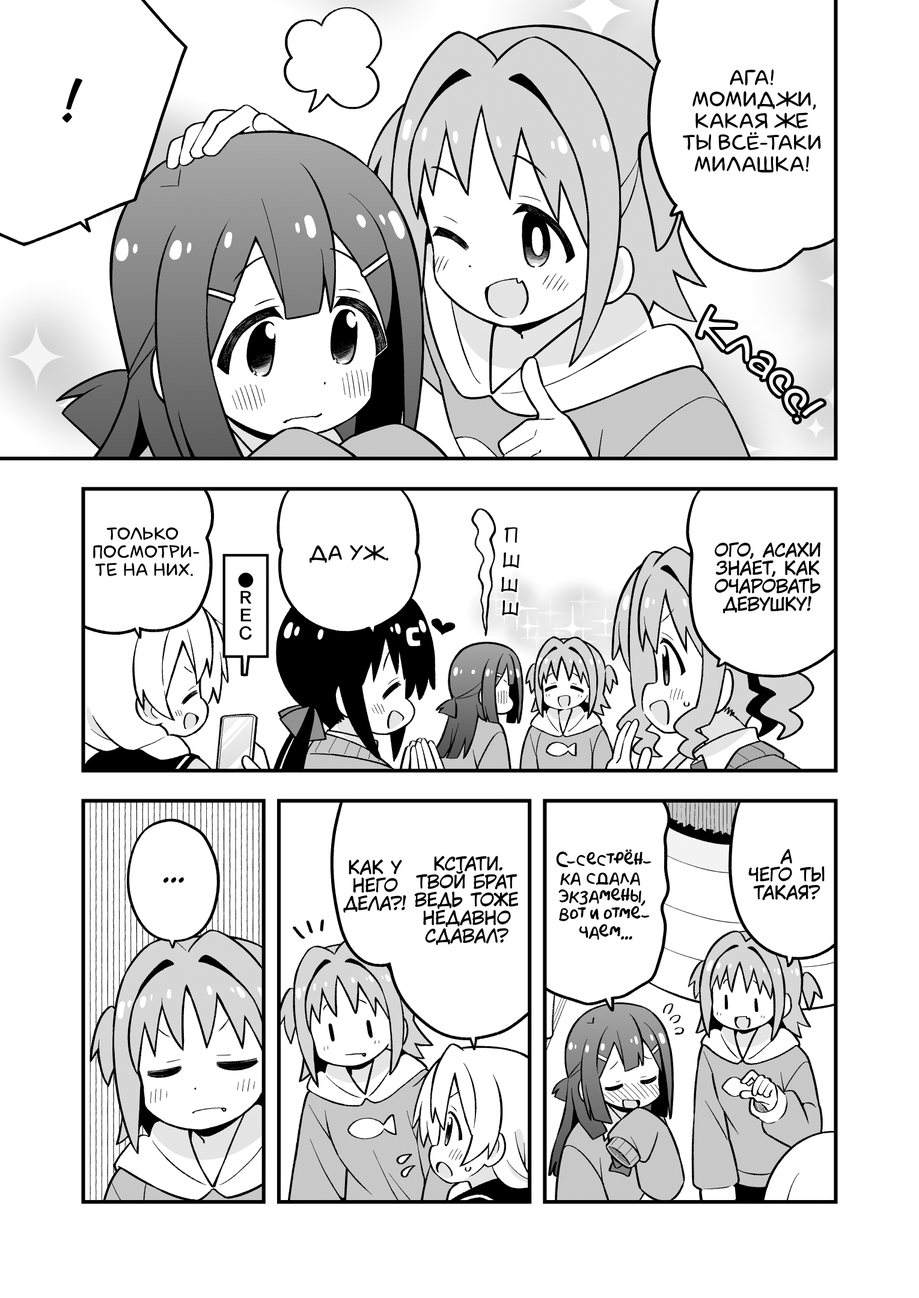
<style>
.page{position:relative;width:919px;height:1298px;background:#ffffff}
.page>*{position:absolute;margin:0}
.t1{font:21.6px "laCartoonerie";color:#000000;text-transform:uppercase}
.t2{font:54.1px "v_CCJeffCampbell";color:#000000;text-transform:uppercase}
.t3{font:18px "laCartoonerie";color:#000000;text-transform:uppercase}
.t4{font:21.6px "DSNote";color:#000000;font-weight:bold}
.t5{font:18px "KuraiVoice2";color:#000000;text-transform:uppercase}
.t6{font:18px "AkbarPlain";color:#000000}
.t7{font:28.8px "KuraiVoice2";color:#000000;text-transform:uppercase}
</style>
<div class="page">
<p class="t1" style="left:683px;top:69px;width:138px;height:103px;text-align:center">Ага!<br>Момиджи,<br>какая же<br>ты всё-таки<br>милашка!</p>
<p class="t2" style="left:62px;top:78px;width:21px;height:45px">!</p>
<p class="t3" style="left:93px;top:527px;width:106px;height:49px;text-align:center">Только<br>посмотри-<br>те на них.</p>
<p class="t4" style="left:504px;top:527px;width:13px;height:16px;rotate:1deg">п</p>
<p class="t1" style="left:309px;top:545px;width:79px;height:18px">Да уж.</p>
<p class="t5" style="left:714px;top:542px;width:106px;height:71px;text-align:center">Ого, Асахи<br>знает, как<br>очаровать<br>девушку!</p>
<p class="t4" style="left:502px;top:552px;width:18px;height:16px;rotate:4deg">ш</p>
<p class="t4" style="left:501px;top:576px;width:16px;height:16px;rotate:3deg">ш</p>
<p class="t4" style="left:502px;top:600px;width:17px;height:16px;rotate:4deg">ш</p>
<p class="t5" style="left:415px;top:856px;width:103px;height:89px;text-align:center">Кстати.<br>Твой брат<br>ведь тоже<br>недавно<br>сдавал?</p>
<p class="t6" style="left:556px;top:849px;width:95px;height:91px;text-align:center">С-сестрён-<br>ка сдала<br>экзамены,<br>вот и отме-<br>чаем...</p>
<p class="t5" style="left:748px;top:848px;width:76px;height:52px;text-align:center">А<br>чего ты<br>такая?</p>
<p class="t5" style="left:343px;top:859px;width:63px;height:54px;text-align:center">Как у<br>него<br>дела?!</p>
<p class="t7" style="left:163px;top:877px;width:21px;height:6px">...</p>
</div>
